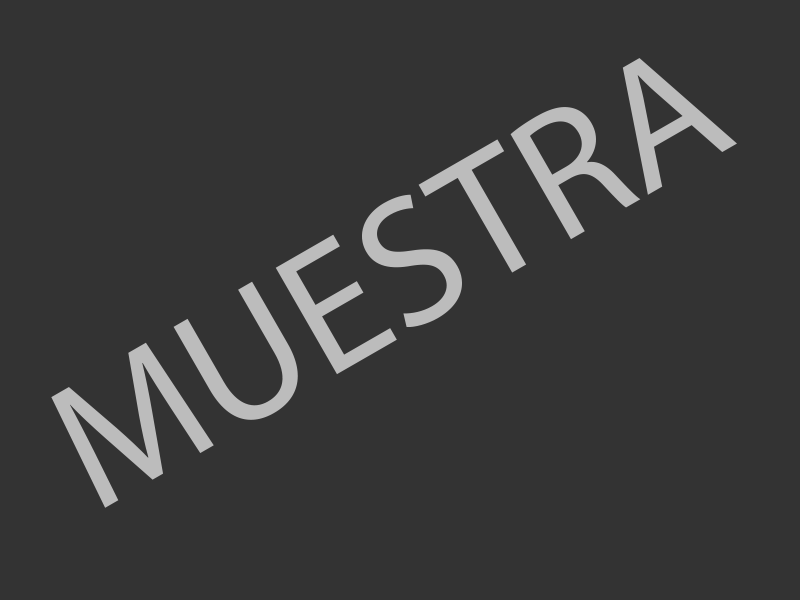
<style>
.page{position:relative;width:800px;height:600px;background:#333333}
.page>*{position:absolute;margin:0}
.t1{font:182px "MyriadPro-Regular";color:#bcbcbc}
</style>
<div class="page">
<p class="t1" style="left:51px;top:58px;width:686px;height:450px;rotate:-30deg">MUESTRA</p>
</div>
